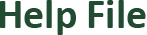
<style>
.page{position:relative;width:147px;height:35px;background:#ffffff}
.page>*{position:absolute;margin:0}
.t1{font:41.7px "Calibri-Bold";color:#224c32}
</style>
<div class="page">
<p class="t1" style="left:0px;top:0px;width:146px;height:35px">Help File</p>
</div>
